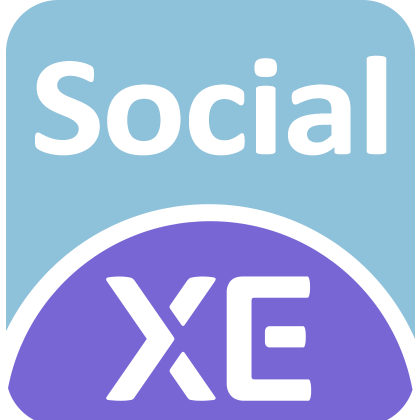
<style>
.page{position:relative;width:420px;height:420px;background:#8ec1da}
.page>*{position:absolute;margin:0}
.t1{font:143.8px "Calibri-Bold";letter-spacing:-0.015em;color:#ffffff;scale:1.09 1}
</style>
<div class="page">
<p class="t1" style="left:35px;top:55px;width:352px;height:101px">Social</p>
</div>
